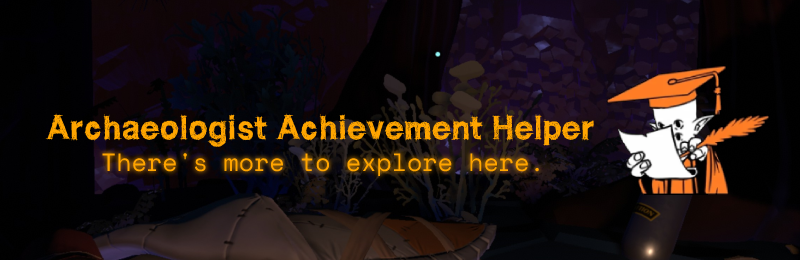
<style>
.page{position:relative;width:800px;height:260px}
.page>*{position:absolute;margin:0}
.t1{font:33px "WCROUGHTRADBta";color:#ffa500}
.t2{font:25px "SpaceMono-Regular";color:#ffa500}
</style>
<div class="page">
<p class="t1" style="left:45px;top:113px;width:550px;height:34px">Archaeologist Achievement Helper</p>
<p class="t2" style="left:102px;top:153px;width:437px;height:23px">There's more to explore here.</p>
</div>
